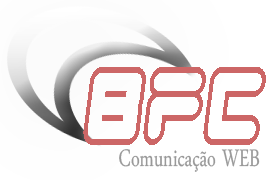
<style>
.page{position:relative;width:272px;height:180px;background:#ffffff}
.page>*{position:absolute;margin:0}
.t1{font:35px "DaunPenh";color:#999999;scale:0.72 1}
</style>
<div class="page">
<p class="t1" style="left:119px;top:149px;width:141px;height:23px">Comunicação WEB</p>
</div>
